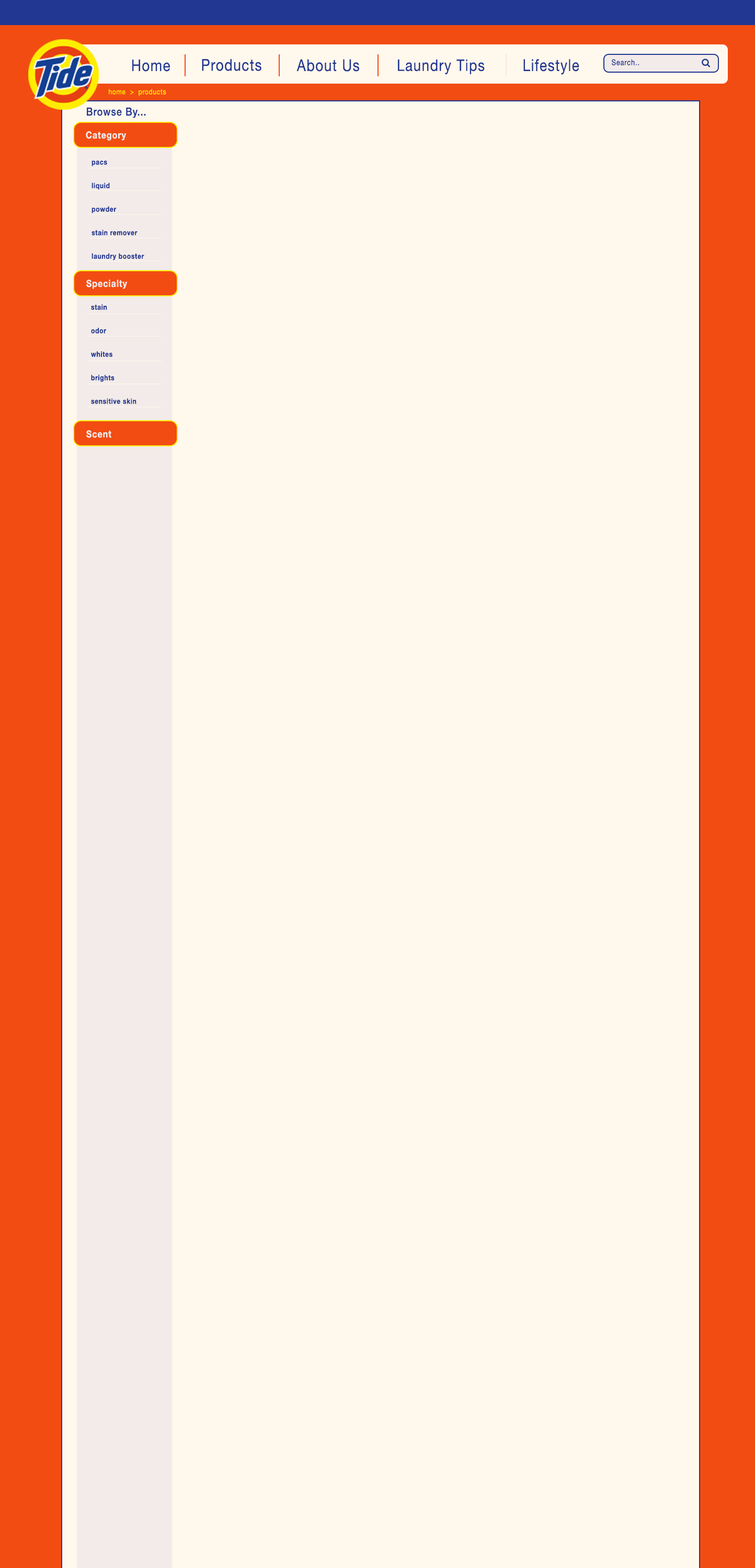
<style>
.page{position:relative;width:755px;height:1568px;background:#fff8ed}
.page>*{position:absolute;margin:0}
.t1{font:16px "HelveticaNeue";letter-spacing:0.06em;color:#223791;scale:0.85 1}
.t2{font:16.2px "HelveticaNeue";letter-spacing:0.06em;color:#223791;scale:0.84 1}
.t3{font:16.4px "HelveticaNeue";letter-spacing:0.06em;color:#223791;scale:0.83 1}
.t4{font:8px "HelveticaNeue";letter-spacing:0.06em;color:#223791;scale:0.85 1}
.t5{font:7.4px "HelveticaNeue";letter-spacing:0.06em;color:#ffed00;scale:0.85 1}
.t6{font:11.1px "HelveticaNeue-Medium";letter-spacing:0.06em;color:#223791;scale:0.85 1}
.t7{font:9.9px "HelveticaNeue-Bold";letter-spacing:0.06em;color:#f2ebe9;scale:0.85 1}
.t8{font:7.4px/23.5px "HelveticaNeue-Bold";letter-spacing:0.06em;color:#223791;scale:0.85 1}
</style>
<div class="page">
<p class="t1" style="left:132px;top:60px;width:38px;height:12px">Home</p>
<p class="t2" style="left:202px;top:59px;width:59px;height:12px">Products</p>
<p class="t3" style="left:296px;top:59px;width:63px;height:13px">About Us</p>
<p class="t1" style="left:398px;top:59px;width:87px;height:16px">Laundry Tips</p>
<p class="t3" style="left:523px;top:59px;width:56px;height:16px">Lifestyle</p>
<p class="t4" style="left:612px;top:59px;width:27px;height:6px">Search..</p>
<p class="t5" style="left:109px;top:89px;width:57px;height:7px">home  &gt;  products</p>
<p class="t6" style="left:87px;top:107px;width:59px;height:11px">Browse By...</p>
<p class="t7" style="left:86px;top:131px;width:40px;height:10px">Category</p>
<p class="t8" style="left:91px;top:160px;width:53px;height:100px;text-align:justify">pacs<br>liquid<br>powder<br>stain remover<br>laundry booster</p>
<p class="t7" style="left:86px;top:280px;width:42px;height:9px">Specialty</p>
<p class="t8" style="left:91px;top:304px;width:45px;height:100px;text-align:justify">stain<br>odor<br>whites<br>brights<br>sensitive skin</p>
<p class="t7" style="left:86px;top:430px;width:25px;height:8px">Scent</p>
</div>
